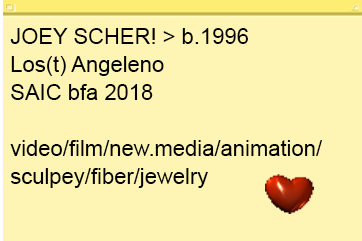
<style>
.page{position:relative;width:362px;height:241px;background:#fef5b4}
.page>*{position:absolute;margin:0}
.t1{font:22px/28px "ArialMT";color:#000000}
</style>
<div class="page">
<p class="t1" style="left:10px;top:28px;width:312px;height:160px">JOEY SCHER! &gt; b.1996<br>Los(t) Angeleno<br>SAIC bfa 2018<br><br>video/film/new.media/animation/<br>sculpey/fiber/jewelry</p>
</div>
